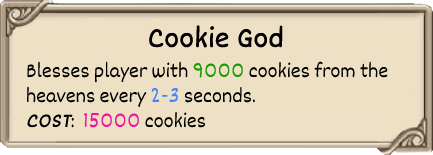
<style>
.page{position:relative;width:433px;height:155px;background:#ede0c4}
.page>*{position:absolute;margin:0}
.t1{font:30px "Dekko";color:#000000;font-weight:bold}
.t2{font:21px "Dekko";color:#000000}
.t3{font:21px "Dekko";color:#1b9902}
.t4{font:21px "Dekko";color:#4086fa}
.t5{font:21px "Dekko";color:#000000;font-weight:bold;font-style:italic}
.t6{font:21px "Dekko";color:#f0129a}
</style>
<div class="page">
<p class="t1" style="left:149px;top:25px;width:134px;height:23px">Cookie God</p>
<p class="t2" style="left:27px;top:61px;width:361px;height:67px">Blesses player with <span class="t3">9000 </span>cookies from the <br>heavens every <span class="t4">2-3 </span>seconds.<br><span class="t5">COST</span>:  <span class="t6">15000</span> cookies</p>
</div>
